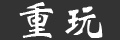
<style>
.page{position:relative;width:120px;height:40px;background:#333333}
.page>*{position:absolute;margin:0}
.t1{font:46.3px "STXinwei";color:#ffffff}
</style>
<div class="page">
<p class="t1" style="left:19px;top:2px;width:84px;height:36px">重玩</p>
</div>
